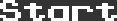
<style>
.page{position:relative;width:117px;height:21px;background:#333333}
.page>*{position:absolute;margin:0}
.t1{font:24px "PressStartK";color:#ffffff}
</style>
<div class="page">
<p class="t1" style="left:0px;top:0px;width:117px;height:21px">Start</p>
</div>
